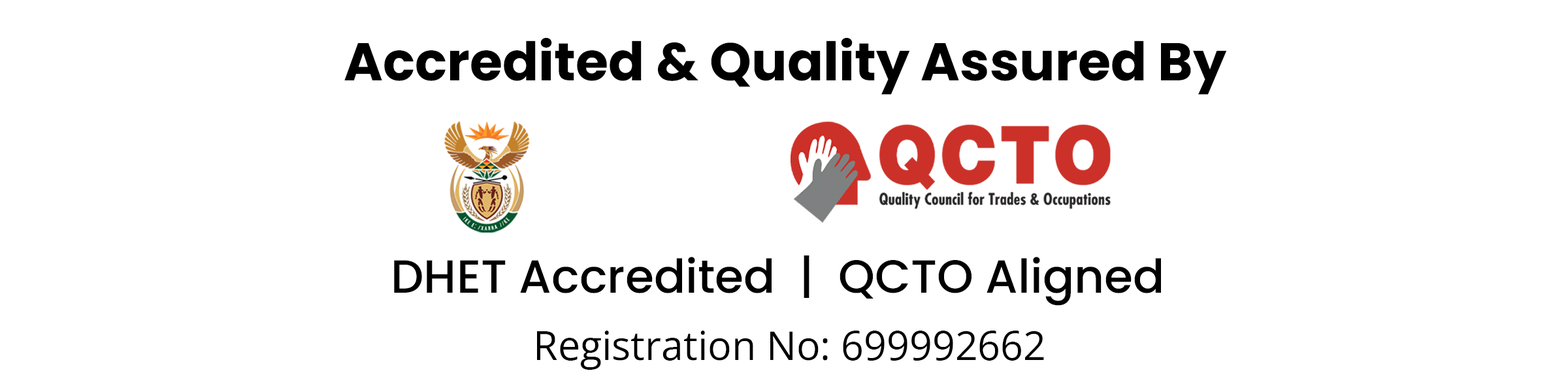
<style>
.page{position:relative;width:1568px;height:392px;background:#ffffff}
.page>*{position:absolute;margin:0}
.t1{font:53.1px "Poppins-Bold";color:#000000}
.t2{font:46.5px "Poppins-Medium";color:#000000}
.t3{font:39.8px "OpenSans-Regular";color:#000000}
</style>
<div class="page">
<p class="t1" style="left:344px;top:38px;width:883px;height:57px">Accredited &amp; Quality Assured By</p>
<p class="t2" style="left:394px;top:255px;width:767px;height:51px">DHET Accredited  |  QCTO Aligned</p>
<p class="t3" style="left:537px;top:331px;width:507px;height:39px">Registration No: 699992662</p>
</div>
